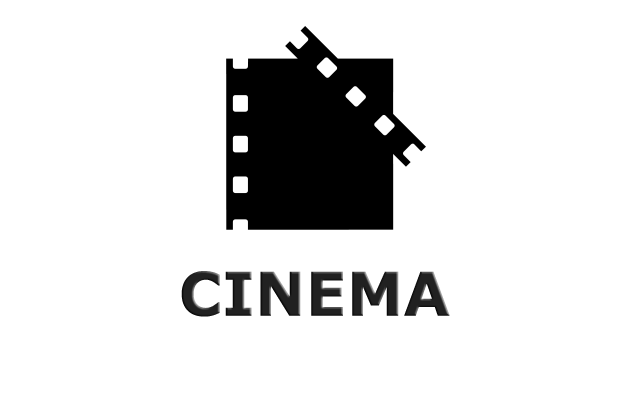
<style>
.page{position:relative;width:629px;height:404px;background:#ffffff}
.page>*{position:absolute;margin:0}
.t1{font:60px "Verdana-Bold";color:#212121}
</style>
<div class="page">
<p class="t1" style="left:181px;top:271px;width:269px;height:46px">CINEMA</p>
</div>
